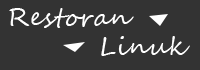
<style>
.page{position:relative;width:200px;height:70px;background:#333333}
.page>*{position:absolute;margin:0}
.t1{font:25px "SegoeScript";letter-spacing:0.03em;color:#ffffff}
</style>
<div class="page">
<p class="t1" style="left:9px;top:8px;width:125px;height:20px">Restoran</p>
<p class="t1" style="left:101px;top:36px;width:89px;height:20px">Linuk</p>
</div>
